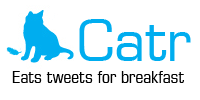
<style>
.page{position:relative;width:200px;height:100px;background:#ffffff}
.page>*{position:absolute;margin:0}
.t1{font:55.2px "EurostileLT";color:#00adef}
.t2{font:17px "EurostileLT-Condensed";color:#000000}
</style>
<div class="page">
<p class="t1" style="left:79px;top:19px;width:112px;height:42px">Catr</p>
<p class="t2" style="left:12px;top:71px;width:172px;height:12px">Eats tweets for breakfast</p>
</div>
